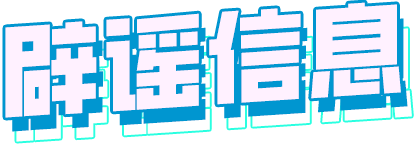
<style>
.page{position:relative;width:414px;height:144px;background:#fff1ff}
.page>*{position:absolute;margin:0}
.t1{font:100px "CKTKingKong";letter-spacing:0.02em;color:#fff1ff}
</style>
<div class="page">
<p class="t1" style="left:5px;top:2px;width:396px;height:116px;rotate:-4deg">辟谣信息</p>
<p class="t1" style="left:5px;top:2px;width:396px;height:116px;rotate:-4deg">辟谣信息</p>
</div>
